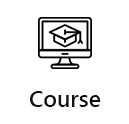
<style>
.page{position:relative;width:129px;height:124px;background:#ffffff}
.page>*{position:absolute;margin:0}
.t1{font:22.9px "YuGothicUI-Semibold";color:#111111}
</style>
<div class="page">
<p class="t1" style="left:30px;top:91px;width:71px;height:16px">Course</p>
</div>
